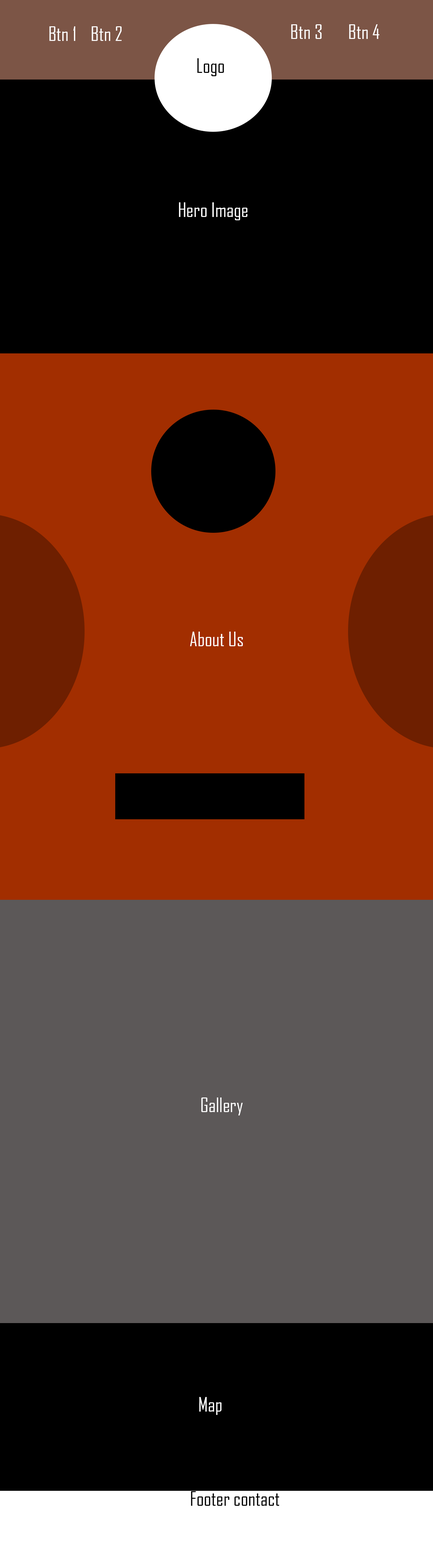
<style>
.page{position:relative;width:433px;height:1568px;background:#000000}
.page>*{position:absolute;margin:0}
.t1{font:19.4px "AgencyFB-Reg";color:#ffffff}
.t2{font:19.4px "AgencyFB-Reg";color:#000000}
</style>
<div class="page">
<p class="t1" style="left:49px;top:26px;width:26px;height:15px">Btn 1</p>
<p class="t1" style="left:92px;top:26px;width:29px;height:15px">Btn 2</p>
<p class="t1" style="left:291px;top:24px;width:30px;height:15px">Btn 3</p>
<p class="t1" style="left:349px;top:24px;width:30px;height:15px">Btn 4</p>
<p class="t2" style="left:197px;top:58px;width:27px;height:18px">Logo</p>
<p class="t1" style="left:179px;top:202px;width:68px;height:18px">Hero Image</p>
<p class="t1" style="left:190px;top:632px;width:53px;height:14px">About Us</p>
<p class="t1" style="left:201px;top:1097px;width:42px;height:18px">Gallery</p>
<p class="t1" style="left:199px;top:1397px;width:22px;height:18px">Map</p>
<p class="t2" style="left:191px;top:1491px;width:88px;height:15px">Footer contact</p>
</div>
